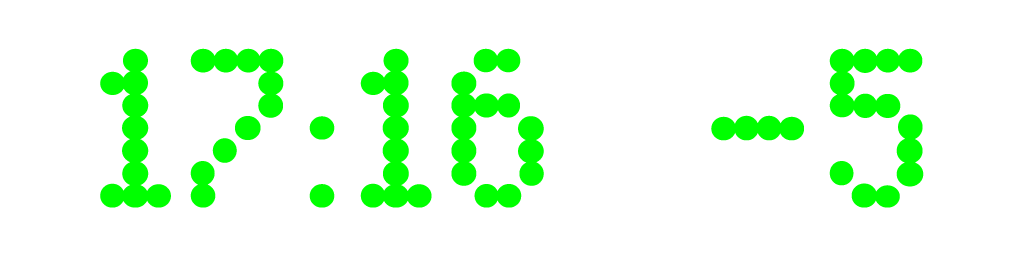
<style>
.page{position:relative;width:1024px;height:256px;background:#ffffff}
.page>*{position:absolute;margin:0}
.t1{font:225.2px "DotMatrix";color:#00ff00;font-weight:bold}
</style>
<div class="page">
<p class="t1" style="left:100px;top:48px;width:824px;height:160px">17:16 -5</p>
</div>
